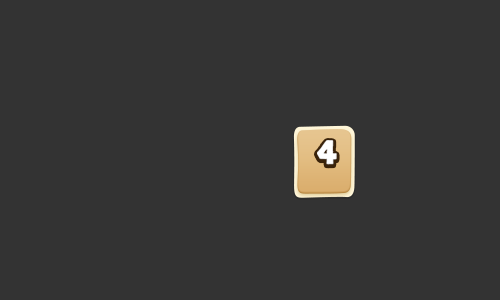
<style>
.page{position:relative;width:500px;height:300px;background:#333333}
.page>*{position:absolute;margin:0}
.t1{font:33px "Skranji-Bold";letter-spacing:0.02em;color:#ffffff;scale:0.96 1}
</style>
<div class="page">
<p class="t1" style="left:317px;top:140px;width:20px;height:25px">4</p>
</div>
